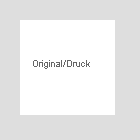
<style>
.page{position:relative;width:140px;height:140px;background:#dedede}
.page>*{position:absolute;margin:0}
.t1{font:9px "ArialMT";color:#666666}
</style>
<div class="page">
<p class="t1" style="left:33px;top:60px;width:57px;height:9px">Original/Druck</p>
</div>
